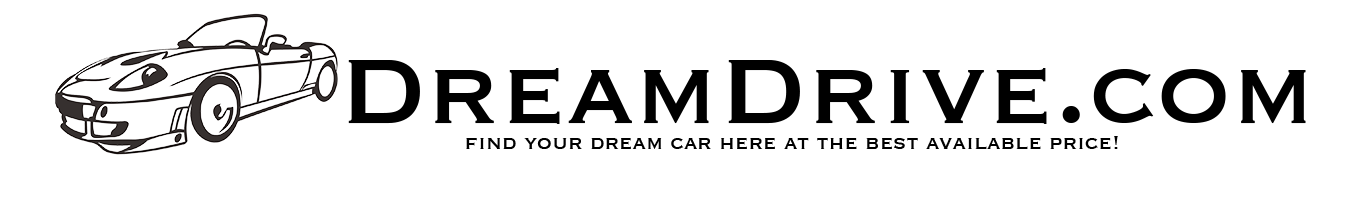
<style>
.page{position:relative;width:1366px;height:200px;background:#ffffff}
.page>*{position:absolute;margin:0}
.t1{font:120px "Copperplate";color:#000000}
.t2{font:24px "Copperplate";color:#000000}
</style>
<div class="page">
<p class="t1" style="left:348px;top:60px;width:958px;height:64px">DreamDrive.com</p>
<p class="t2" style="left:466px;top:136px;width:652px;height:13px">find your dream car here at the best available price!</p>
</div>
